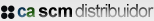
<style>
.page{position:relative;width:154px;height:21px}
.page>*{position:absolute;margin:0}
.t1{font:18px "ArialMT";letter-spacing:-0.05em}
.t2{font:18px "Arial-BoldMT";letter-spacing:-0.025em;color:#000000}
.t3{font:18px "Arial-BoldMT";letter-spacing:-0.05em;color:#0e4267}
.t4{font:18px "Arial-BoldMT";letter-spacing:-0.05em;color:#205b10}
</style>
<div class="page">
<p class="t1" style="left:75px;top:4px;width:79px;height:14px">distribuidor</p>
<p class="t2" style="left:17px;top:7px;width:55px;height:11px"><span class="t3">c</span><span class="t4">a </span>scm</p>
</div>
